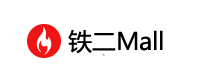
<style>
.page{position:relative;width:200px;height:80px;background:#ffffff}
.page>*{position:absolute;margin:0}
.t1{font:24px "MicrosoftYaHei";color:#000000}
</style>
<div class="page">
<p class="t1" style="left:68px;top:29px;width:95px;height:25px">铁二Mall</p>
</div>
